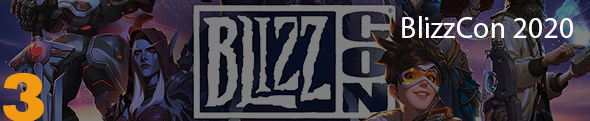
<style>
.page{position:relative;width:590px;height:121px}
.page>*{position:absolute;margin:0}
.t1{font:30px "MyriadPro-Regular";color:#ffffff}
.t2{font:70px "Rockwell-ExtraBold";color:#f09911}
</style>
<div class="page">
<p class="t1" style="left:402px;top:16px;width:171px;height:22px">BlizzCon 2020</p>
<p class="t2" style="left:3px;top:73px;width:41px;height:49px">3</p>
</div>
